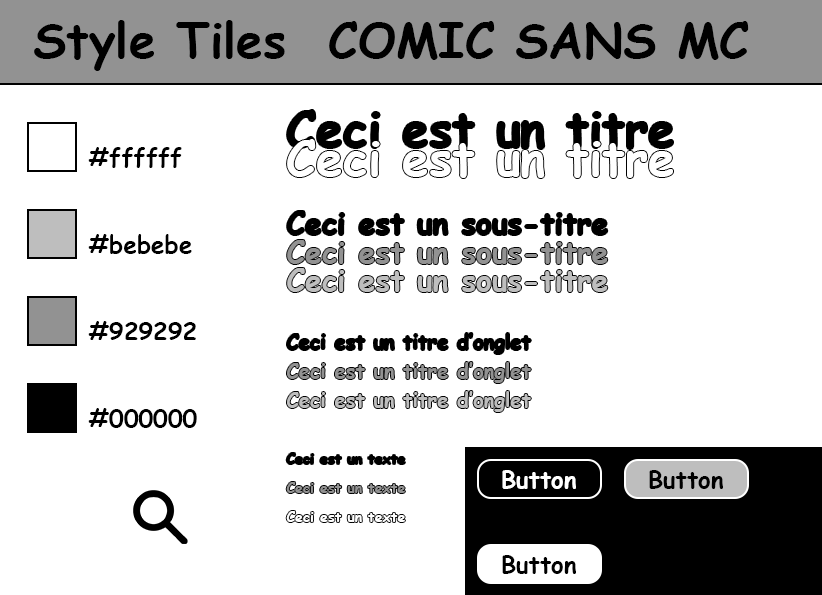
<style>
.page{position:relative;width:822px;height:595px;background:#ffffff}
.page>*{position:absolute;margin:0}
.t1{font:48px "ComicSansMS-Bold";color:#000000}
.t2{font:20px/28.8px "ComicSansMS-Bold";color:#000000}
.t3{font:48px/28.8px "ComicSansMS-Bold";color:#000000}
.t4{font:48px/28.8px "ComicSansMS-Bold";color:#ffffff}
.t5{font:30px/28.8px "ComicSansMS-Bold";color:#000000}
.t6{font:30px/28.8px "ComicSansMS-Bold";color:#929292}
.t7{font:30px/28.8px "ComicSansMS-Bold";color:#bebebe}
.t8{font:20px/28.8px "ComicSansMS-Bold";color:#929292}
.t9{font:20px/28.8px "ComicSansMS-Bold";color:#bebebe}
.t10{font:14px/28.8px "ComicSansMS-Bold";color:#000000}
.t11{font:14px/28.8px "ComicSansMS-Bold";color:#929292}
.t12{font:14px/28.8px "ComicSansMS-Bold";color:#ffffff}
.t13{font:24px "ComicSansMS-Bold";color:#000000}
.t14{font:24px "ComicSansMS-Bold";color:#ffffff}
</style>
<div class="page">
<p class="t1" style="left:34px;top:20px;width:715px;height:51px">Style Tiles  COMIC SANS MC</p>
<p class="t2" style="left:286px;top:110px;width:387px;height:412px"><span class="t3">Ceci est un titre<br></span><span class="t4">Ceci est un titre<br><br></span><span class="t5">Ceci est un sous-titre<br></span><span class="t6">Ceci est un sous-titre<br></span><span class="t7">Ceci est un sous-titre<br><br></span>Ceci est un titre d’onglet<br><span class="t8">Ceci est un titre d’onglet<br></span><span class="t9">Ceci est un titre d’onglet<br><br></span><span class="t10">Ceci est un texte<br></span><span class="t11">Ceci est un texte<br></span><span class="t12">Ceci est un texte</span></p>
<p class="t13" style="left:88px;top:147px;width:94px;height:21px">#ffffff</p>
<p class="t13" style="left:88px;top:234px;width:104px;height:20px">#bebebe</p>
<p class="t13" style="left:88px;top:321px;width:108px;height:19px">#929292</p>
<p class="t13" style="left:88px;top:408px;width:109px;height:20px">#000000</p>
<p class="t14" style="left:502px;top:470px;width:74px;height:19px">Button</p>
<p class="t13" style="left:649px;top:470px;width:74px;height:19px">Button</p>
<p class="t13" style="left:502px;top:555px;width:74px;height:19px">Button</p>
</div>
